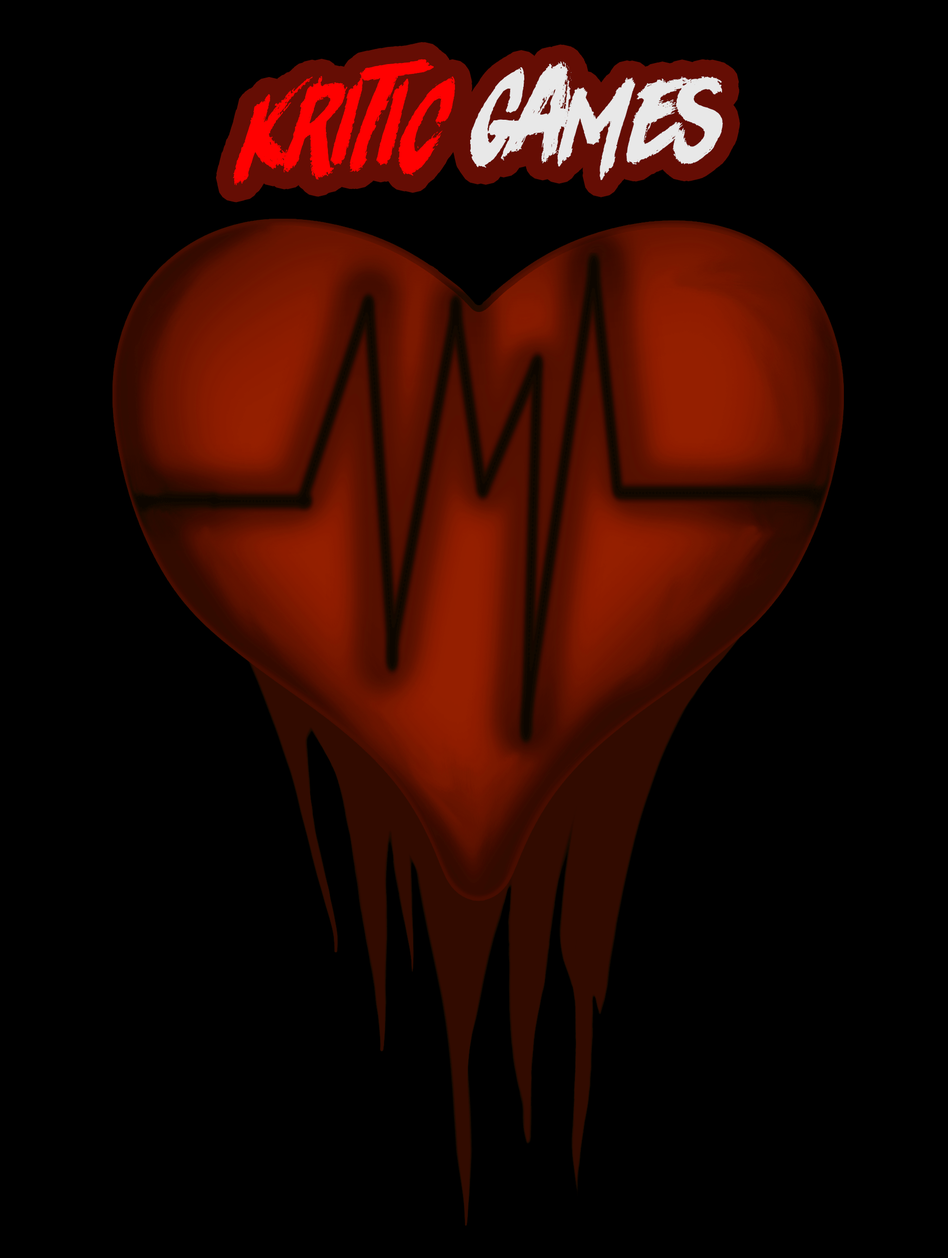
<style>
.page{position:relative;width:948px;height:1258px;background:#000000}
.page>*{position:absolute;margin:0}
.t1{font:110.6px "Rhinos-rocks";color:#ff0101}
.t2{font:110.6px "Rhinos-rocks";color:#e8e8e8}
</style>
<div class="page">
<p class="t1" style="left:233px;top:59px;width:222px;height:126px">Kritic</p>
<p class="t2" style="left:470px;top:61px;width:253px;height:119px">Games</p>
</div>
